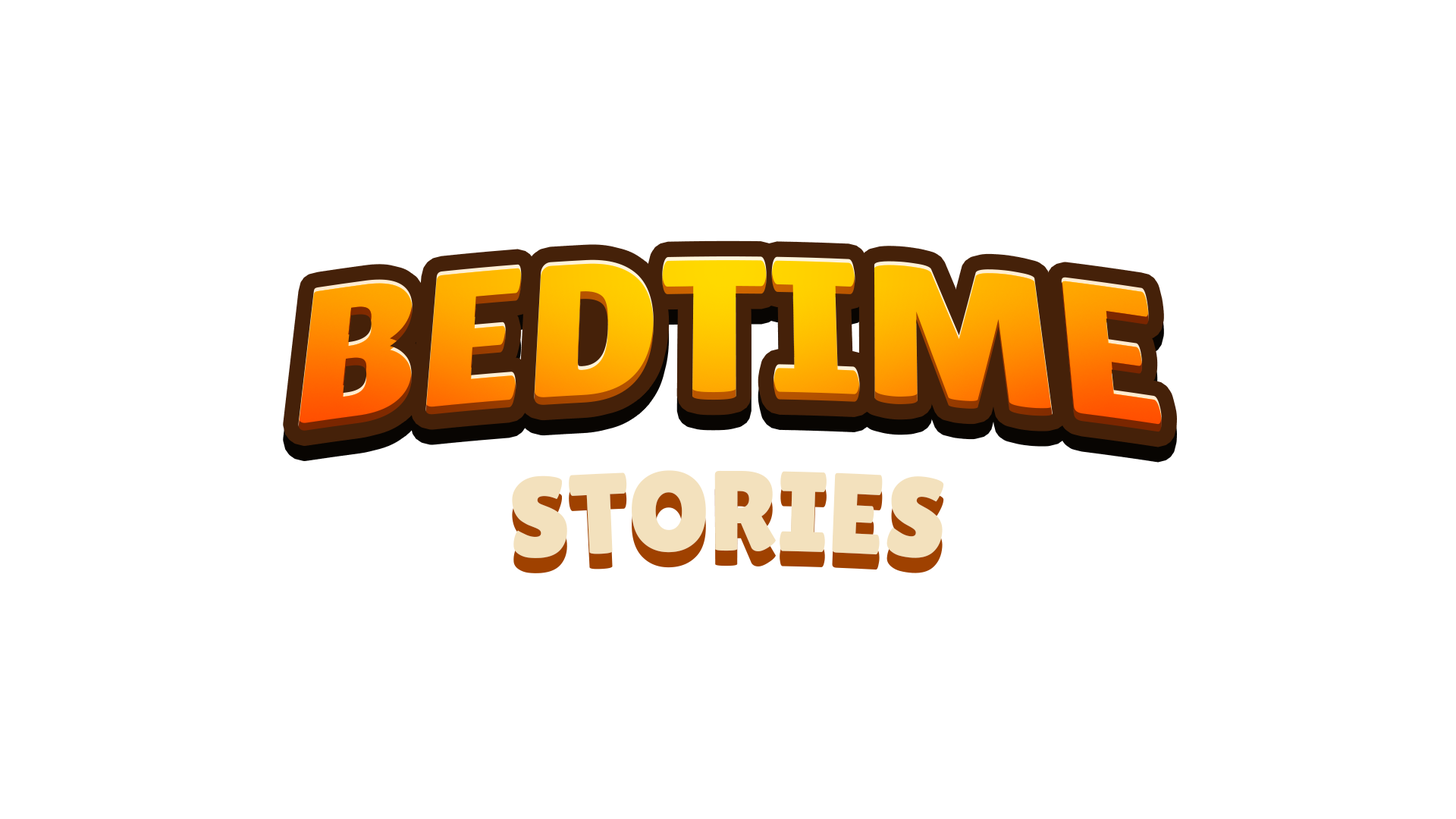
<style>
.page{position:relative;width:1456px;height:819px;background:#ffffff}
.page>*{position:absolute;margin:0}
.t1{font:207.9px "LilitaOne"}
.t2{font:113.5px "LilitaOne";color:#f3e1bd}
</style>
<div class="page">
<p class="t1" style="left:298px;top:256px;width:864px;height:176px">BEDTIME</p>
<p class="t2" style="left:512px;top:470px;width:432px;height:88px">STORIES</p>
</div>
